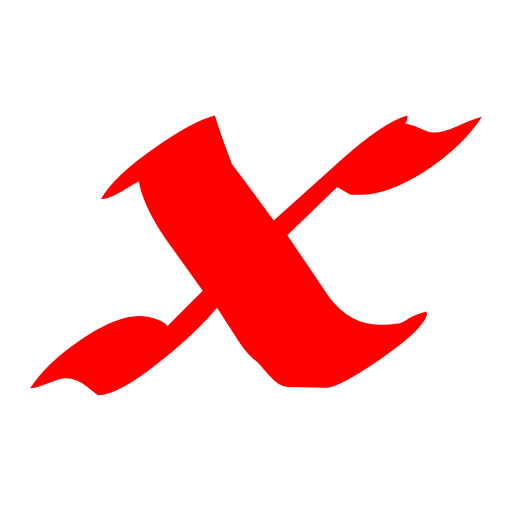
<style>
.page{position:relative;width:512px;height:512px;background:#ffffff}
.page>*{position:absolute;margin:0}
.t1{font:349.5px "FloranteatLauraItalic";color:#ff0000}
</style>
<div class="page">
<p class="t1" style="left:30px;top:115px;width:452px;height:281px">X</p>
</div>
